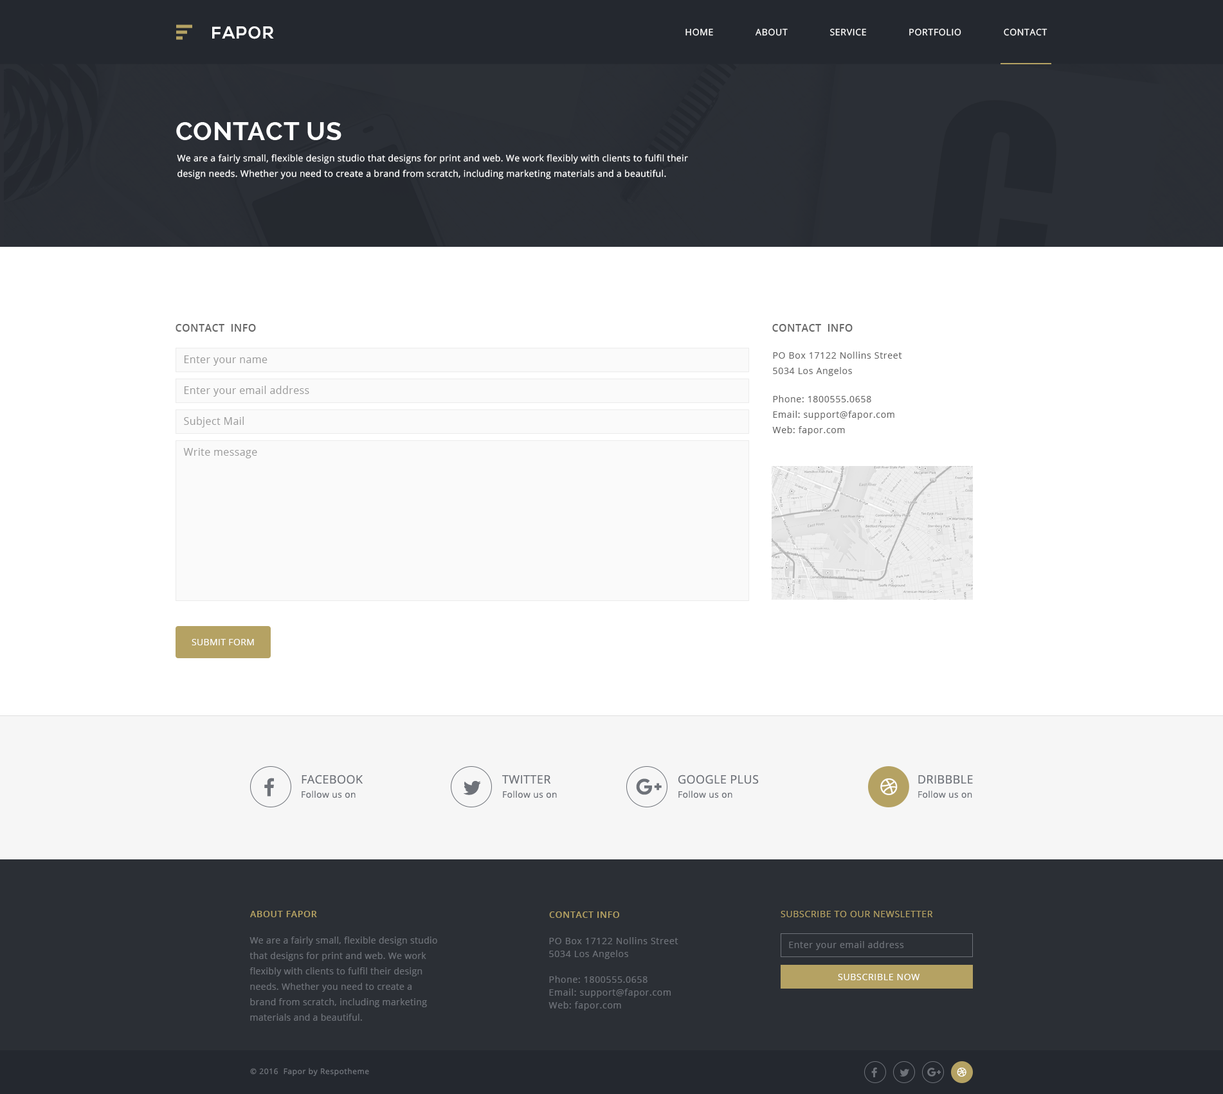
<style>
.page{position:relative;width:1223px;height:1094px;background:#ffffff}
.page>*{position:absolute;margin:0}
.t1{font:16.7px "NexaBold";letter-spacing:0.06em;color:#ffffff;text-transform:uppercase}
.t2{font:9px "OpenSans";letter-spacing:0.05em;color:#ffffff;text-transform:uppercase}
.t3{font:25.7px "Raleway-Bold";letter-spacing:0.025em;color:#ffffff;text-transform:uppercase}
.t4{font:9px/15.4px "OpenSans";letter-spacing:0.025em;color:#ffffff}
.t5{font:10.3px "OpenSans-Semibold";letter-spacing:0.025em;color:#666666;text-transform:uppercase}
.t6{font:9px/15.4px "OpenSans";letter-spacing:0.05em;color:#666666}
.t7{font:10.3px "OpenSans";letter-spacing:0.025em;color:#999999}
.t8{font:9px "OpenSans";letter-spacing:0.025em;color:#ffffff}
.t9{font:9px/14.1px "OpenSans";letter-spacing:0.025em;color:#6e7279}
.t10{font:11.6px/14.1px "OpenSans";letter-spacing:0.025em;color:#6e7279}
.t11{font:9px "OpenSans-Semibold";letter-spacing:0.05em;color:#b5a263;text-transform:uppercase}
.t12{font:9px "OpenSans";letter-spacing:0.05em;color:#b5a263;text-transform:uppercase}
.t13{font:9px/15.4px "OpenSans";letter-spacing:0.025em;color:#6e7279}
.t14{font:9px/12.9px "OpenSans";letter-spacing:0.05em;color:#6e7279}
.t15{font:9px "OpenSans";letter-spacing:0.05em;color:#6e7279}
.t16{font:9px "OpenSans";letter-spacing:0.05em;color:#ffffff}
.t17{font:7.7px "OpenSans";letter-spacing:0.05em;color:#6e7279}
</style>
<div class="page">
<p class="t1" style="left:212px;top:26px;width:62px;height:13px">Fapor</p>
<p class="t2" style="left:685px;top:28px;width:362px;height:8px">Home               About               service               portfolio               contact</p>
<p class="t3" style="left:176px;top:122px;width:165px;height:18px">Contact Us</p>
<p class="t4" style="left:177px;top:154px;width:511px;height:25px">We are a fairly small, flexible design studio that designs for print and web. We work flexibly with clients to fulfil their design needs. Whether you need to create a brand from scratch, including marketing materials and a beautiful.</p>
<p class="t5" style="left:176px;top:324px;width:80px;height:8px">CoNtact  INFO</p>
<p class="t5" style="left:772px;top:324px;width:80px;height:8px">CoNtact  INFO</p>
<p class="t6" style="left:772px;top:352px;width:130px;height:83px">PO Box 17122 Nollins Street<br>5034 Los Angelos<br><br>Phone: 1800555.0658<br>Email: support@fapor.com<br>Web: fapor.com</p>
<p class="t7" style="left:184px;top:356px;width:83px;height:10px">Enter your name</p>
<p class="t7" style="left:184px;top:386px;width:125px;height:11px">Enter your email address</p>
<p class="t7" style="left:184px;top:417px;width:60px;height:11px">Subject Mail</p>
<p class="t7" style="left:183px;top:448px;width:74px;height:10px">Write message</p>
<p class="t8" style="left:192px;top:639px;width:62px;height:6px">SUBMIT FORM</p>
<p class="t9" style="left:302px;top:775px;width:61px;height:23px"><span class="t10">FACEBOOK<br></span>Follow us on</p>
<p class="t9" style="left:502px;top:775px;width:55px;height:23px"><span class="t10">TWITTER<br></span>Follow us on</p>
<p class="t9" style="left:678px;top:775px;width:81px;height:23px"><span class="t10">GOOGLE PLUS<br></span>Follow us on</p>
<p class="t9" style="left:918px;top:775px;width:55px;height:23px"><span class="t10">DRIBBBLE<br></span>Follow us on</p>
<p class="t11" style="left:250px;top:911px;width:67px;height:6px">ABOUT FAPOR</p>
<p class="t11" style="left:549px;top:912px;width:70px;height:6px">Contact INFO</p>
<p class="t12" style="left:780px;top:911px;width:153px;height:6px">Subscribe to our newsletter</p>
<p class="t13" style="left:249px;top:937px;width:188px;height:84px">We are a fairly small, flexible design studio that designs for print and web. We work flexibly with clients to fulfil their design needs. Whether you need to create a brand from scratch, including marketing materials and a beautiful.</p>
<p class="t14" style="left:548px;top:937px;width:130px;height:74px">PO Box 17122 Nollins Street<br>5034 Los Angelos<br><br>Phone: 1800555.0658<br>Email: support@fapor.com<br>Web: fapor.com</p>
<p class="t15" style="left:789px;top:941px;width:115px;height:9px">Enter your email address</p>
<p class="t16" style="left:838px;top:974px;width:82px;height:6px">SUBSCRIBLE NOW</p>
<p class="t17" style="left:250px;top:1068px;width:119px;height:8px">© 2016  Fapor by Respotheme</p>
</div>
